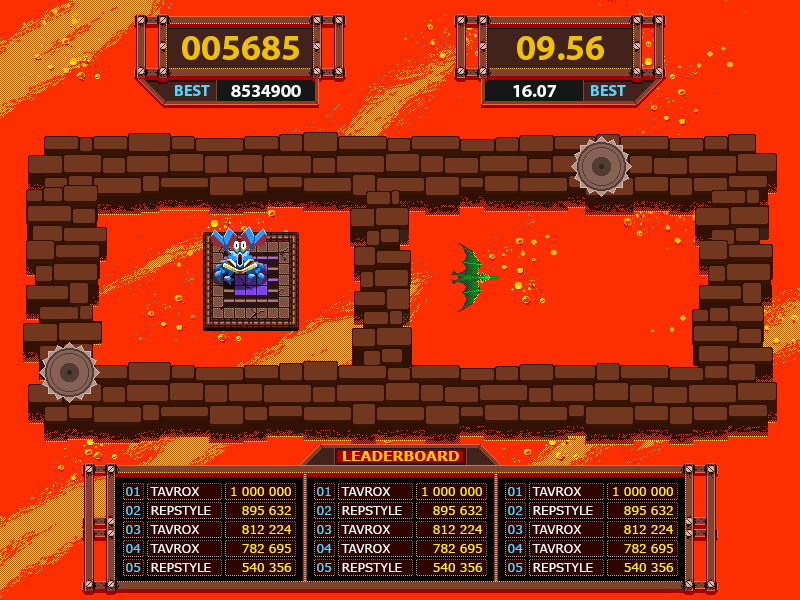
<style>
.page{position:relative;width:800px;height:600px;background:#fd2f01}
.page>*{position:absolute;margin:0}
.t1{font:36px "MyriadPro-Bold";color:#f0c100}
.t2{font:16px "MyriadPro-Bold";color:#51d7ff}
.t3{font:18px "MyriadPro-Bold";color:#ffffff}
.t4{font:14px "Verdana-Bold";color:#ffcc00}
.t5{font:12px "Verdana";color:#4ed7ff}
.t6{font:12px "Verdana";color:#ffffff}
.t7{font:12px "Verdana";color:#fff000}
</style>
<div class="page">
<p class="t1" style="left:182px;top:36px;width:117px;height:24px">005685</p>
<p class="t1" style="left:517px;top:36px;width:87px;height:24px">09.56</p>
<p class="t2" style="left:175px;top:85px;width:35px;height:11px">BEST</p>
<p class="t3" style="left:231px;top:85px;width:70px;height:12px">8534900</p>
<p class="t3" style="left:513px;top:85px;width:43px;height:12px">16.07</p>
<p class="t2" style="left:591px;top:85px;width:35px;height:11px">BEST</p>
<p class="t4" style="left:343px;top:451px;width:116px;height:10px">LEADERBOARD</p>
<p class="t5" style="left:126px;top:487px;width:14px;height:9px">01</p>
<p class="t6" style="left:150px;top:487px;width:49px;height:9px">TAVROX</p>
<p class="t7" style="left:231px;top:487px;width:60px;height:9px">1 000 000</p>
<p class="t5" style="left:317px;top:487px;width:14px;height:9px">01</p>
<p class="t6" style="left:341px;top:487px;width:49px;height:9px">TAVROX</p>
<p class="t7" style="left:422px;top:487px;width:60px;height:9px">1 000 000</p>
<p class="t5" style="left:508px;top:487px;width:14px;height:9px">01</p>
<p class="t6" style="left:532px;top:487px;width:49px;height:9px">TAVROX</p>
<p class="t7" style="left:613px;top:487px;width:60px;height:9px">1 000 000</p>
<p class="t5" style="left:126px;top:506px;width:15px;height:9px">02</p>
<p class="t6" style="left:151px;top:506px;width:60px;height:9px">REPSTYLE</p>
<p class="t7" style="left:242px;top:506px;width:49px;height:9px">895 632</p>
<p class="t5" style="left:317px;top:506px;width:15px;height:9px">02</p>
<p class="t6" style="left:342px;top:506px;width:60px;height:9px">REPSTYLE</p>
<p class="t7" style="left:433px;top:506px;width:49px;height:9px">895 632</p>
<p class="t5" style="left:508px;top:506px;width:15px;height:9px">02</p>
<p class="t6" style="left:533px;top:506px;width:60px;height:9px">REPSTYLE</p>
<p class="t7" style="left:624px;top:506px;width:49px;height:9px">895 632</p>
<p class="t5" style="left:126px;top:525px;width:15px;height:9px">03</p>
<p class="t6" style="left:150px;top:525px;width:49px;height:9px">TAVROX</p>
<p class="t7" style="left:242px;top:525px;width:50px;height:9px">812 224</p>
<p class="t5" style="left:317px;top:525px;width:15px;height:9px">03</p>
<p class="t6" style="left:341px;top:525px;width:49px;height:9px">TAVROX</p>
<p class="t7" style="left:433px;top:525px;width:50px;height:9px">812 224</p>
<p class="t5" style="left:508px;top:525px;width:15px;height:9px">03</p>
<p class="t6" style="left:532px;top:525px;width:49px;height:9px">TAVROX</p>
<p class="t7" style="left:624px;top:525px;width:50px;height:9px">812 224</p>
<p class="t5" style="left:126px;top:544px;width:15px;height:9px">04</p>
<p class="t6" style="left:150px;top:544px;width:49px;height:9px">TAVROX</p>
<p class="t7" style="left:242px;top:544px;width:49px;height:9px">782 695</p>
<p class="t5" style="left:317px;top:544px;width:15px;height:9px">04</p>
<p class="t6" style="left:341px;top:544px;width:49px;height:9px">TAVROX</p>
<p class="t7" style="left:433px;top:544px;width:49px;height:9px">782 695</p>
<p class="t5" style="left:508px;top:544px;width:15px;height:9px">04</p>
<p class="t6" style="left:532px;top:544px;width:49px;height:9px">TAVROX</p>
<p class="t7" style="left:624px;top:544px;width:49px;height:9px">782 695</p>
<p class="t5" style="left:126px;top:563px;width:15px;height:9px">05</p>
<p class="t6" style="left:151px;top:563px;width:60px;height:9px">REPSTYLE</p>
<p class="t7" style="left:242px;top:563px;width:50px;height:9px">540 356</p>
<p class="t5" style="left:317px;top:563px;width:15px;height:9px">05</p>
<p class="t6" style="left:342px;top:563px;width:60px;height:9px">REPSTYLE</p>
<p class="t7" style="left:433px;top:563px;width:50px;height:9px">540 356</p>
<p class="t5" style="left:508px;top:563px;width:15px;height:9px">05</p>
<p class="t6" style="left:533px;top:563px;width:60px;height:9px">REPSTYLE</p>
<p class="t7" style="left:624px;top:563px;width:50px;height:9px">540 356</p>
</div>
